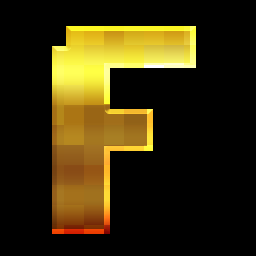
<style>
.page{position:relative;width:256px;height:256px;background:#000000}
.page>*{position:absolute;margin:0}
.t1{font:250px "8BITWONDERNominal";letter-spacing:-0.04em;text-transform:uppercase;scale:0.69 1}
</style>
<div class="page">
<p class="t1" style="left:52px;top:26px;width:144px;height:208px">F</p>
</div>
